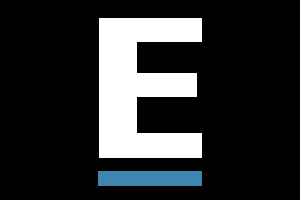
<style>
.page{position:relative;width:300px;height:200px;background:#000000}
.page>*{position:absolute;margin:0}
.t1{font:196px "OpenSans-Bold";color:#ffffff;scale:1.28 1}
</style>
<div class="page">
<p class="t1" style="left:99px;top:18px;width:103px;height:140px">E</p>
</div>
